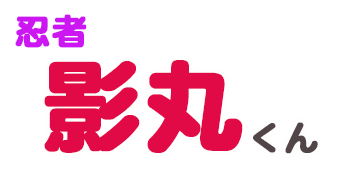
<style>
.page{position:relative;width:360px;height:180px;background:#ffffff}
.page>*{position:absolute;margin:0}
.t1{font:36px "DFMaruGothic-SB-MP-RKSJ-H";color:#cc17f3;font-weight:bold}
.t2{font:100px "DFMaruGothic-SB-MP-RKSJ-H";color:#e10a47;font-weight:bold}
.t3{font:36px "DFMaruGothic-SB-MP-RKSJ-H";color:#514548;font-weight:bold}
</style>
<div class="page">
<p class="t1" style="left:15px;top:14px;width:72px;height:34px">忍者</p>
<p class="t2" style="left:44px;top:60px;width:274px;height:94px">影丸<span class="t3">くん</span></p>
</div>
